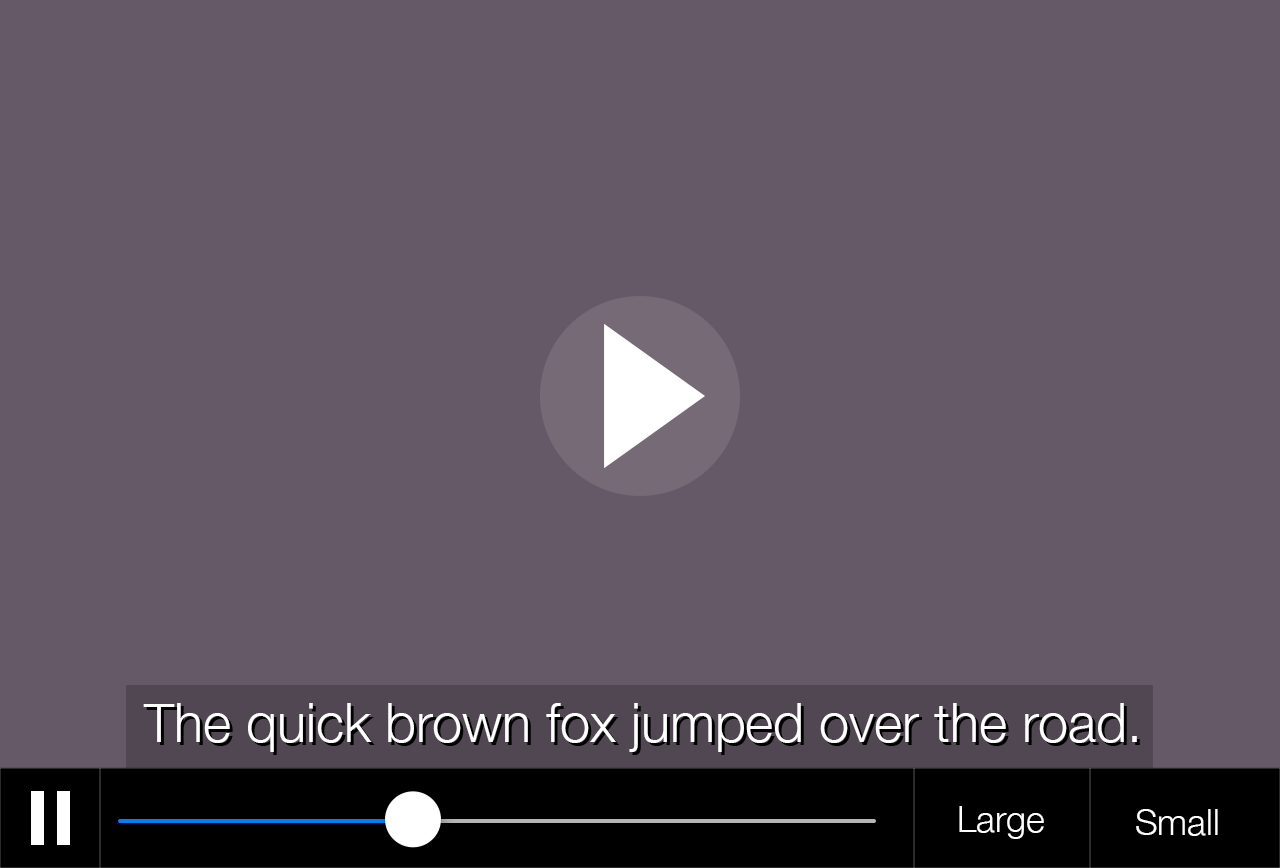
<style>
.page{position:relative;width:1280px;height:868px;background:#655967}
.page>*{position:absolute;margin:0}
.t1{font:53.8px "HelveticaNeue-Light";color:#ffffff}
.t2{font:36px "HelveticaNeue-Light";color:#ffffff}
</style>
<div class="page">
<p class="t1" style="left:143px;top:703px;width:994px;height:49px">The quick brown fox jumped over the road.</p>
<p class="t2" style="left:959px;top:806px;width:85px;height:33px">Large</p>
<p class="t2" style="left:1136px;top:809px;width:82px;height:27px">Small</p>
</div>
